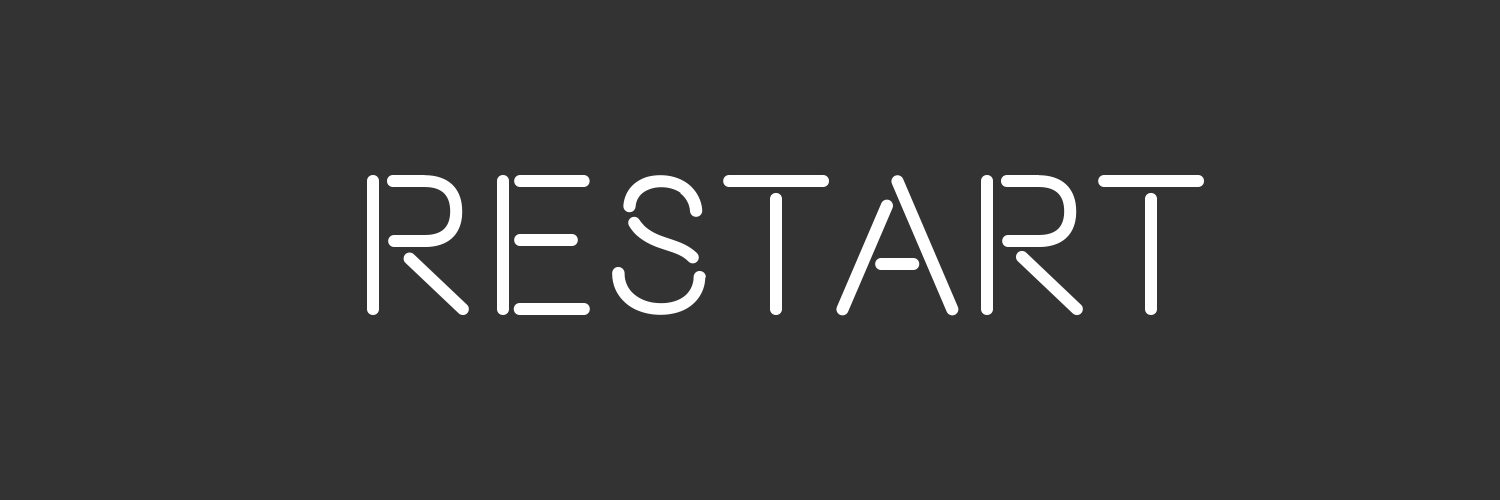
<style>
.page{position:relative;width:1500px;height:500px;background:#333333}
.page>*{position:absolute;margin:0}
.t1{font:200px "Beon-Medium";color:#ffffff}
</style>
<div class="page">
<p class="t1" style="left:367px;top:175px;width:837px;height:141px">Restart</p>
</div>
